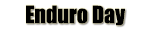
<style>
.page{position:relative;width:150px;height:30px;background:#ffffff}
.page>*{position:absolute;margin:0}
.t1{font:22px "Impact";color:#000000}
</style>
<div class="page">
<p class="t1" style="left:26px;top:5px;width:99px;height:21px">Enduro Day</p>
</div>
